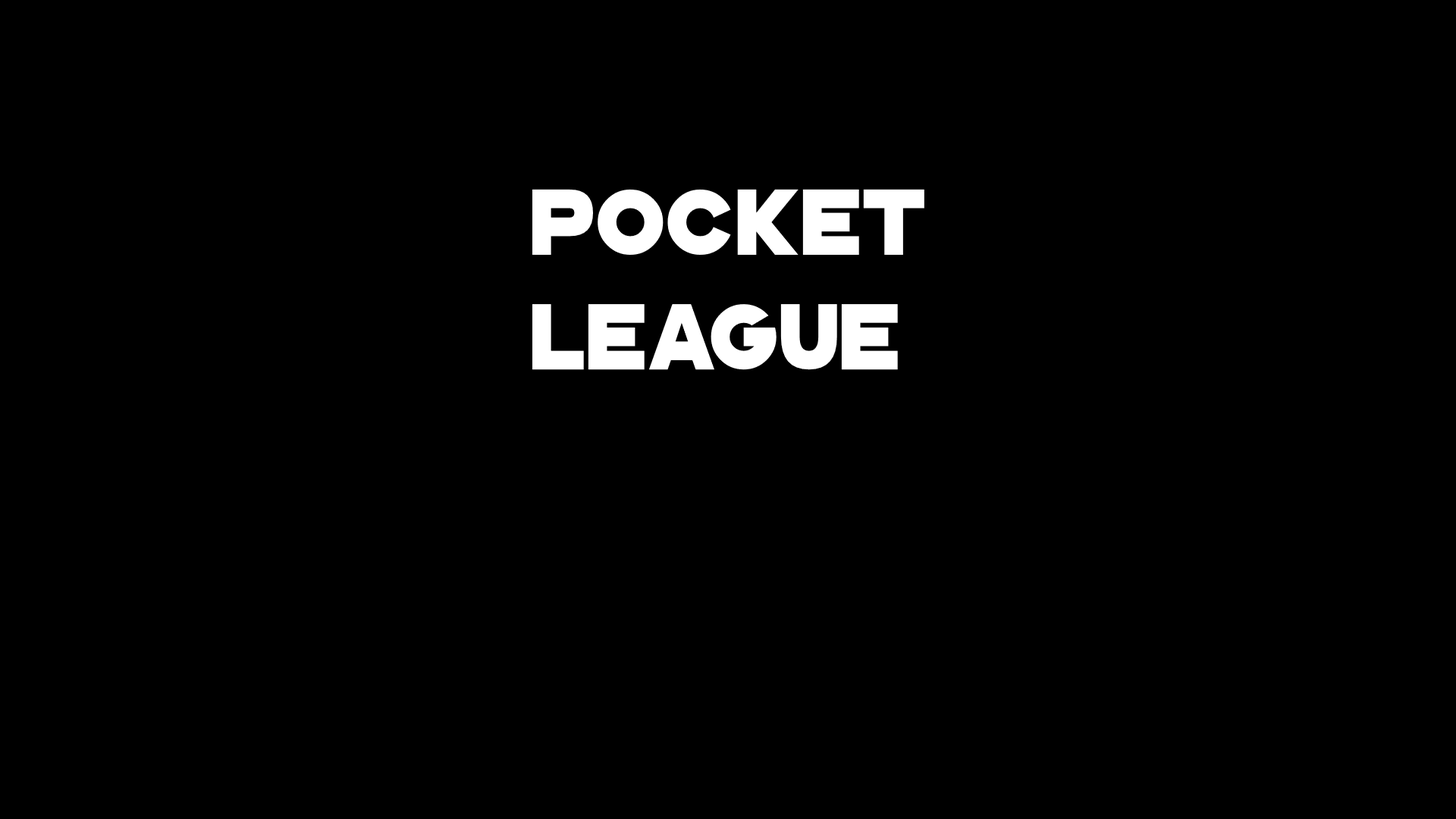
<style>
.page{position:relative;width:1456px;height:819px;background:#000000}
.page>*{position:absolute;margin:0}
.t1{font:95.5px "GoGoPosterPunch";color:#ffffff}
</style>
<div class="page">
<p class="t1" style="left:532px;top:189px;width:392px;height:181px">Pocket<br>League</p>
</div>
